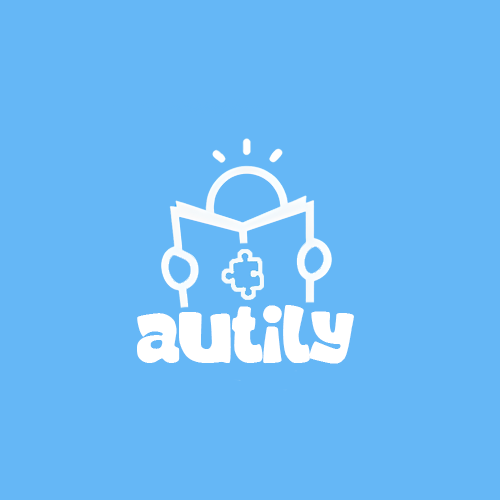
<style>
.page{position:relative;width:500px;height:500px;background:#65b7f6}
.page>*{position:absolute;margin:0}
.t1{font:72.2px "DaddyCartoon";color:#ffffff}
</style>
<div class="page">
<p class="t1" style="left:137px;top:305px;width:217px;height:59px">AUTILY</p>
</div>
